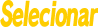
<style>
.page{position:relative;width:98px;height:28px;background:#ffffff}
.page>*{position:absolute;margin:0}
.t1{font:32px "RodinPro-EB";letter-spacing:-0.051em;color:#fecd00;font-style:italic;scale:0.6 1}
</style>
<div class="page">
<p class="t1" style="left:0px;top:0px;width:98px;height:27px">Selecionar</p>
</div>
